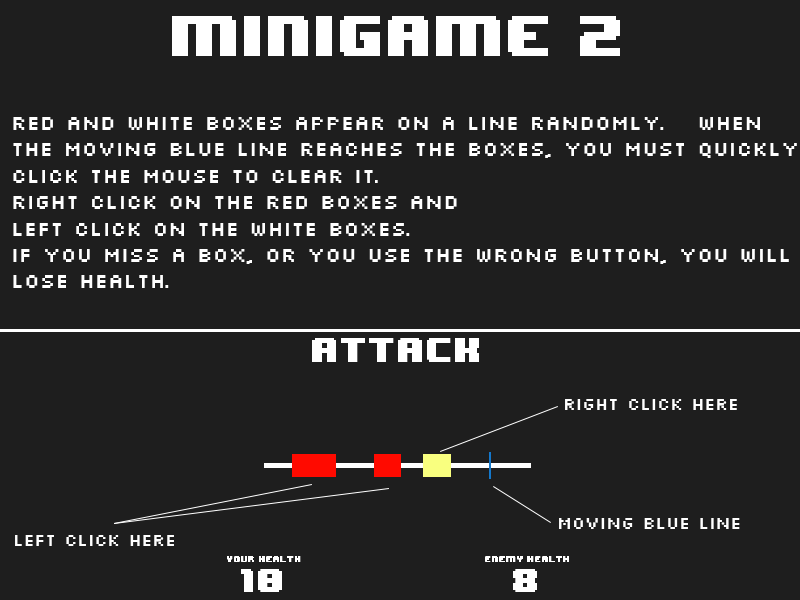
<style>
.page{position:relative;width:800px;height:600px;background:#1e1e1e}
.page>*{position:absolute;margin:0}
.t1{font:48px "8BITWONDERNominal";color:#ffffff}
.t2{font:22px "Silkscreen";color:#ffffff}
.t3{font:18px "Silkscreen";color:#ffffff}
</style>
<div class="page">
<p class="t1" style="left:172px;top:16px;width:448px;height:40px">minigame 2</p>
<p class="t2" style="left:13px;top:117px;width:784px;height:171px">RED and white boxes appear on a line randomly.   When <br>the moving blue line reaches the boxes, you must quickly<br>click the mouse to clear it.  <br>Right click on the red boxes and <br>left click on the white boxes.   <br>If you miss a box, or you use the wrong button, you will<br>lose health.</p>
<p class="t3" style="left:565px;top:399px;width:172px;height:11px">right click here</p>
<p class="t3" style="left:559px;top:518px;width:181px;height:11px">Moving blue line</p>
<p class="t3" style="left:15px;top:535px;width:159px;height:11px">Left click here</p>
</div>
